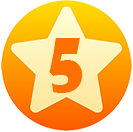
<style>
.page{position:relative;width:133px;height:132px;background:#ffffff}
.page>*{position:absolute;margin:0}
.t1{font:72px "ShowcardGothic-Reg";color:#fd6f01}
</style>
<div class="page">
<p class="t1" style="left:49px;top:37px;width:34px;height:56px">5</p>
</div>
